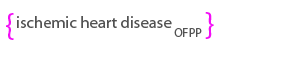
<style>
.page{position:relative;width:300px;height:60px;background:#ffffff}
.page>*{position:absolute;margin:0}
.t1{font:33.3px "MyriadPro-Regular";color:#f30df6}
.t2{font:16.7px "MyriadPro-Regular";color:#525252}
.t3{font:12.5px "MyriadPro-Regular";color:#525252}
</style>
<div class="page">
<p class="t1" style="left:6px;top:13px;width:8px;height:27px">{</p>
<p class="t2" style="left:17px;top:16px;width:155px;height:12px">ischemic heart disease</p>
<p class="t1" style="left:205px;top:12px;width:9px;height:27px">}</p>
<p class="t3" style="left:174px;top:28px;width:28px;height:9px">OFPP</p>
</div>
